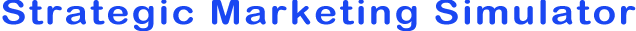
<style>
.page{position:relative;width:636px;height:31px;background:#ffffff}
.page>*{position:absolute;margin:0}
.t1{font:34px "ArialRoundedMTBold";letter-spacing:0.06em;color:#1a47f2;scale:1.15 1}
</style>
<div class="page">
<p class="t1" style="left:2px;top:0px;width:634px;height:31px">Strategic Marketing Simulator</p>
</div>
